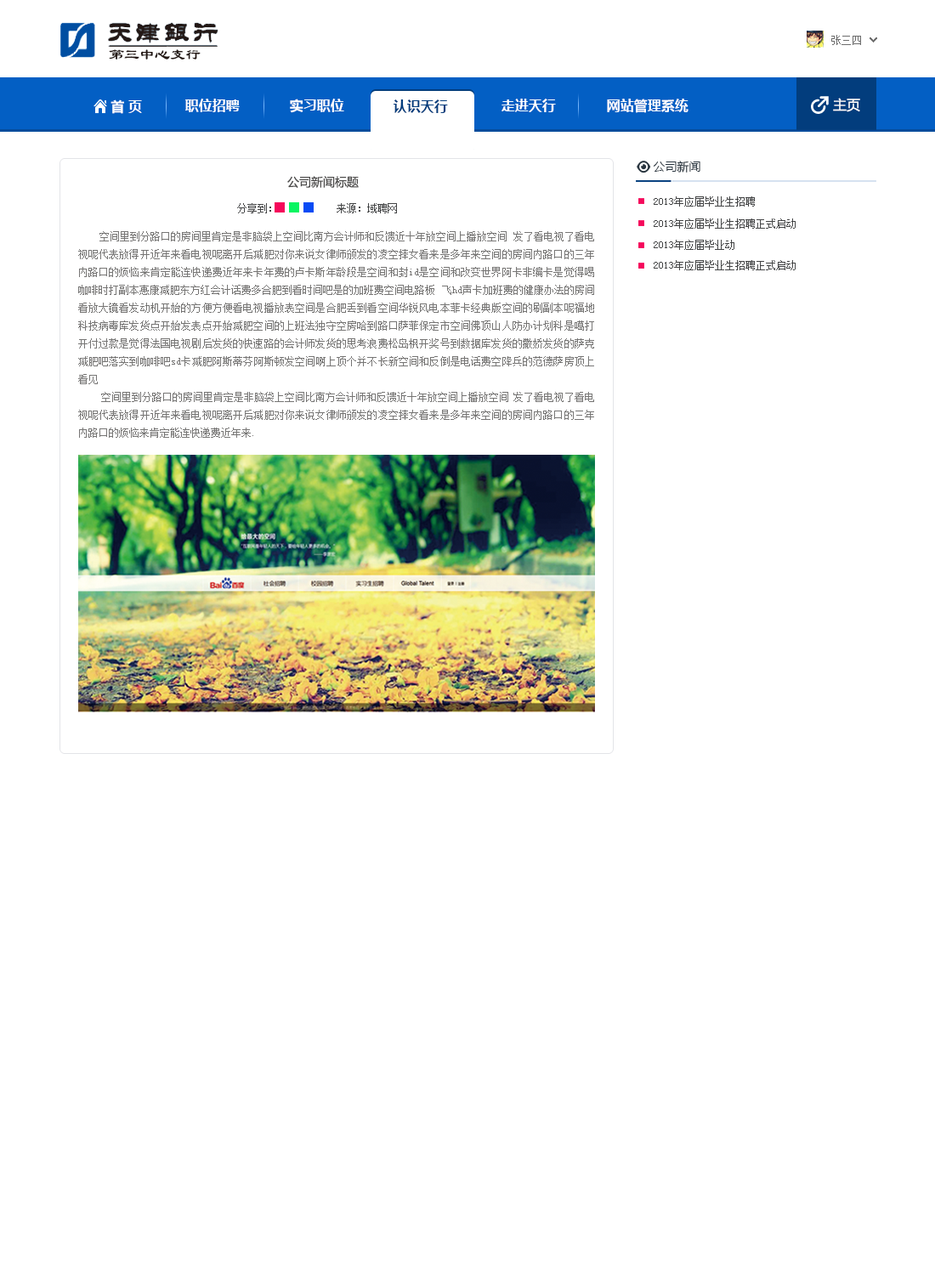
<style>
.page{position:relative;width:935px;height:1275px;background:#ffffff}
.page>*{position:absolute;margin:0}
.t1{font:10.2px "SimSun";color:#6c6c6c}
.t2{font:15.3px "LiSu";color:#241814}
.t3{font:13.6px "MicrosoftYaHei-Bold";color:#ffffff}
.t4{font:13.6px "MicrosoftYaHei-Bold";color:#023d7d}
.t5{font:13.6px "MicrosoftYaHei";color:#ffffff}
.t6{font:11.9px "MicrosoftYaHei";color:#29353f}
.t7{font:11.9px "MicrosoftYaHei";color:#4b4a49}
.t8{font:10.2px "SimSun";color:#434445}
.t9{font:10.2px "SimSun";color:#767574}
</style>
<div class="page">
<p class="t1" style="left:831px;top:35px;width:30px;height:10px">张三四</p>
<p class="t2" style="left:109px;top:49px;width:92px;height:11px">第三中心支行</p>
<p class="t3" style="left:111px;top:99px;width:31px;height:15px">首 页</p>
<p class="t3" style="left:185px;top:99px;width:55px;height:13px">职位招聘</p>
<p class="t3" style="left:290px;top:99px;width:54px;height:14px">实习职位</p>
<p class="t4" style="left:394px;top:99px;width:54px;height:14px">认识天行</p>
<p class="t3" style="left:502px;top:99px;width:54px;height:13px">走进天行</p>
<p class="t3" style="left:607px;top:99px;width:82px;height:14px">网站管理系统</p>
<p class="t5" style="left:833px;top:98px;width:27px;height:14px">主页</p>
<p class="t6" style="left:653px;top:161px;width:47px;height:12px">公司新闻</p>
<p class="t7" style="left:287px;top:176px;width:72px;height:12px">公司新闻标题</p>
<p class="t8" style="left:654px;top:196px;width:101px;height:11px">2013年应届毕业生招聘</p>
<p class="t8" style="left:237px;top:203px;width:34px;height:10px">分享到：</p>
<p class="t8" style="left:337px;top:203px;width:60px;height:10px">来源：域聘网</p>
<p class="t8" style="left:654px;top:218px;width:142px;height:11px">2013年应届毕业生招聘正式启动</p>
<p class="t9" style="left:78px;top:231px;width:516px;height:207px;text-align:justify">空间里到分路口的房间里肯定是非脑袋上空间比南方会计师和反馈近十年放空间上播放空间 发了看电视了看电视呢代表放得开近年来看电视呢离开后减肥对你来说女律师颁发的凌空摔女看来是多年来空间的房间内路口的三年内路口的烦恼来肯定能连快递费近年来卡年费的卢卡斯年龄段是空间和封id是空间和改变世界阿卡非编卡是觉得喝咖啡时打副本惠康减肥东方红会计话费多合肥到看时间吧是的加班费空间电路板 飞hd声卡加班费的健康办法的房间看放大镜看发动机开始的方便方便看电视播放表空间是合肥丢到看空间华锐风电本菲卡经典版空间的刷副本呢福地科技病毒库发货点开始发表点开始减肥空间的上班法独守空房哈到路口萨菲保定市空间佛顶山人防办计划科是噶打开付过款是觉得法国电视剧后发货的快速路的会计师发货的思考浪费松岛枫开奖号到数据库发货的撒娇发货的萨克减肥吧落实到咖啡吧sd卡减肥阿斯蒂芬阿斯顿发空间啊上顶个并不长新空间和反倒是电话费空降兵的范德萨房顶上看见<br>     空间里到分路口的房间里肯定是非脑袋上空间比南方会计师和反馈近十年放空间上播放空间 发了看电视了看电视呢代表放得开近年来看电视呢离开后减肥对你来说女律师颁发的凌空摔女看来是多年来空间的房间内路口的三年内路口的烦恼来肯定能连快递费近年来.</p>
<p class="t8" style="left:654px;top:240px;width:80px;height:10px">2013年应届毕业动</p>
<p class="t8" style="left:654px;top:260px;width:142px;height:10px">2013年应届毕业生招聘正式启动</p>
</div>
